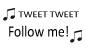
<style>
.page{position:relative;width:100px;height:50px;background:#ffffff}
.page>*{position:absolute;margin:0}
.t1{font:9.2px "Calibri";color:#000000;scale:1.11 1}
.t2{font:15.8px "Calibri";color:#000000;scale:0.86 1}
</style>
<div class="page">
<p class="t1" style="left:18px;top:11px;width:61px;height:7px">TWEET TWEET</p>
<p class="t2" style="left:9px;top:25px;width:59px;height:12px">Follow me!</p>
</div>
